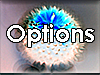
<style>
.page{position:relative;width:100px;height:75px}
.page>*{position:absolute;margin:0}
.t1{font:24px "CenturyGothic-Bold";color:#ffffff}
</style>
<div class="page">
<p class="t1" style="left:7px;top:24px;width:87px;height:23px">Options</p>
</div>
